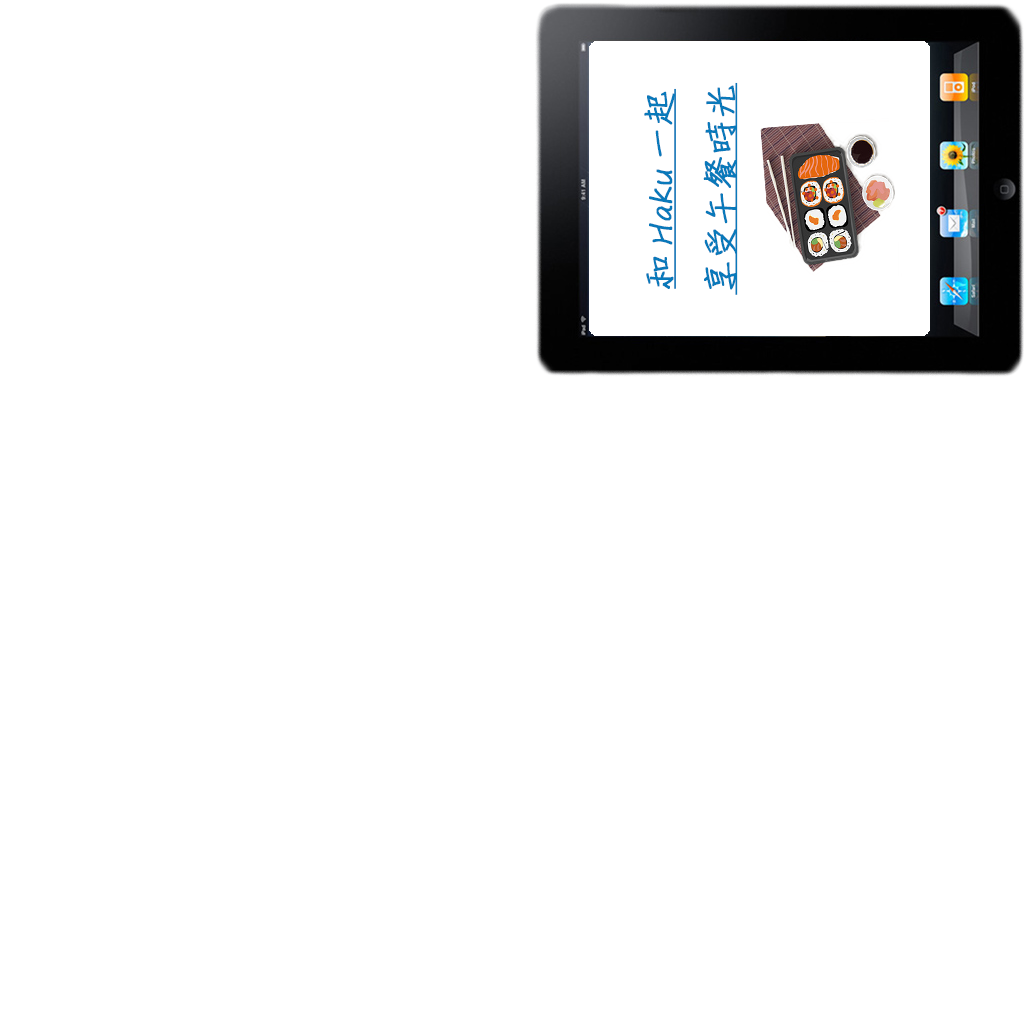
<style>
.page{position:relative;width:1024px;height:1024px;background:#ffffff}
.page>*{position:absolute;margin:0}
.t1{font:35px "DFChu-W4-WINP-BF";color:#0979ba;font-weight:bold;text-decoration:underline}
</style>
<div class="page">
<p class="t1" style="left:644px;top:82px;width:94px;height:213px;text-align:center;rotate:-90deg">和Haku一起<br>享受午餐時光</p>
</div>
